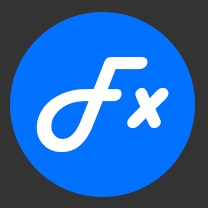
<style>
.page{position:relative;width:208px;height:208px;background:#0072ff}
.page>*{position:absolute;margin:0}
.t1{font:106.4px "HarlowSolid";color:#ffffff}
</style>
<div class="page">
<p class="t1" style="left:36px;top:57px;width:133px;height:95px">Fx</p>
</div>
